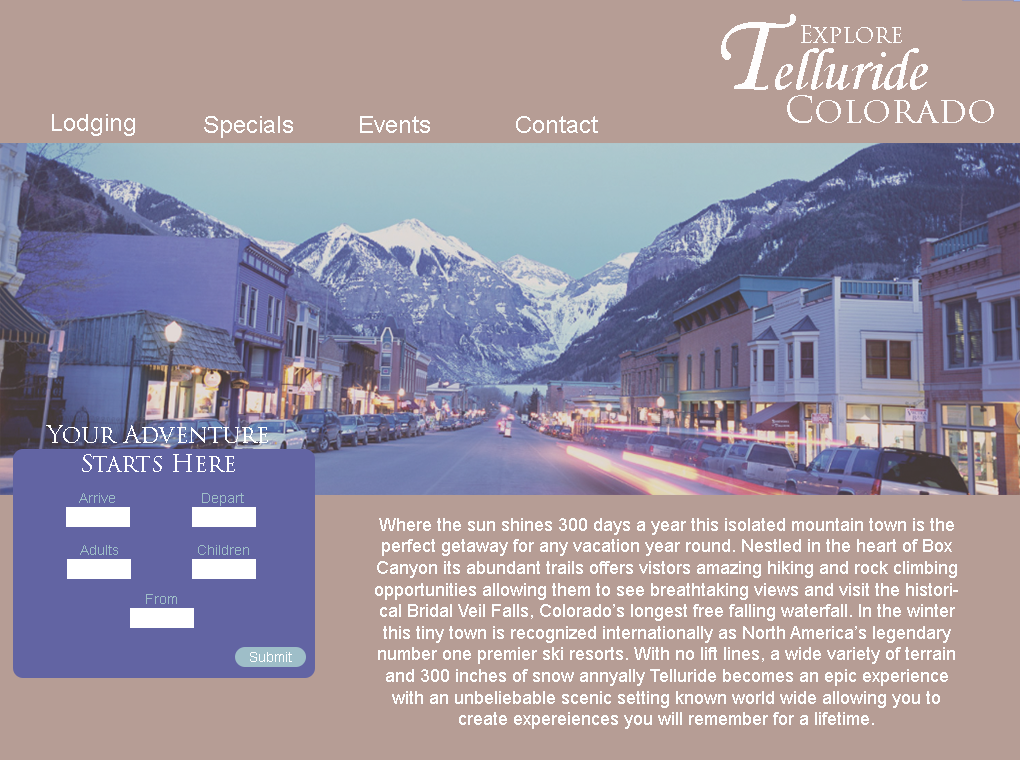
<style>
.page{position:relative;width:1020px;height:760px;background:#b69d95}
.page>*{position:absolute;margin:0}
.t1{font:60px "MonotypeCorsiva";color:#fefdfd}
.t2{font:115px "MonotypeCorsiva";color:#fefdfd}
.t3{font:24px "TrajanPro3-Regular";color:#fefdfd}
.t4{font:36px "TrajanPro3-Regular";color:#fefdfd}
.t5{font:24px "ArialMT";color:#feffff}
.t6{font:24px "TrajanPro3-Regular";color:#ffffff}
.t7{font:14px "ArialMT";color:#9ebec8}
.t8{font:18px "ArialMT";color:#feffff}
.t9{font:14px "ArialMT";color:#feffff}
</style>
<div class="page">
<p class="t1" style="left:721px;top:14px;width:207px;height:76px"><span class="t2">T</span>elluride</p>
<p class="t3" style="left:801px;top:25px;width:101px;height:18px">Explore</p>
<p class="t4" style="left:787px;top:95px;width:207px;height:28px">Colorado</p>
<p class="t5" style="left:52px;top:114px;width:83px;height:22px">Lodging</p>
<p class="t5" style="left:204px;top:116px;width:89px;height:22px">Specials</p>
<p class="t5" style="left:360px;top:116px;width:70px;height:17px">Events</p>
<p class="t5" style="left:516px;top:116px;width:82px;height:17px">Contact</p>
<p class="t6" style="left:46px;top:425px;width:222px;height:47px;text-align:center">Your Adventure Starts Here</p>
<p class="t7" style="left:79px;top:493px;width:36px;height:10px">Arrive</p>
<p class="t7" style="left:202px;top:493px;width:42px;height:13px">Depart</p>
<p class="t8" style="left:375px;top:518px;width:583px;height:211px;text-align:center">Where the sun shines 300 days a year this isolated mountain town is the perfect getaway for any vacation year round. Nestled in the heart of Box Canyon its abundant trails offers vistors amazing hiking and rock climbing opportunities allowing them to see breathtaking views and visit the historical Bridal Veil Falls, Colorado’s longest free falling waterfall. In the winter this tiny town is recognized internationally as North America’s legendary number one premier ski resorts. With no lift lines, a wide variety of terrain and 300 inches of snow annyally Telluride becomes an epic experience with an unbeliebable scenic setting known world wide allowing you to create expereiences you will remember for a lifetime.</p>
<p class="t7" style="left:80px;top:545px;width:38px;height:10px">Adults</p>
<p class="t7" style="left:198px;top:545px;width:51px;height:10px">Children</p>
<p class="t7" style="left:146px;top:594px;width:31px;height:10px">From</p>
<p class="t9" style="left:250px;top:652px;width:42px;height:10px">Submit</p>
</div>
